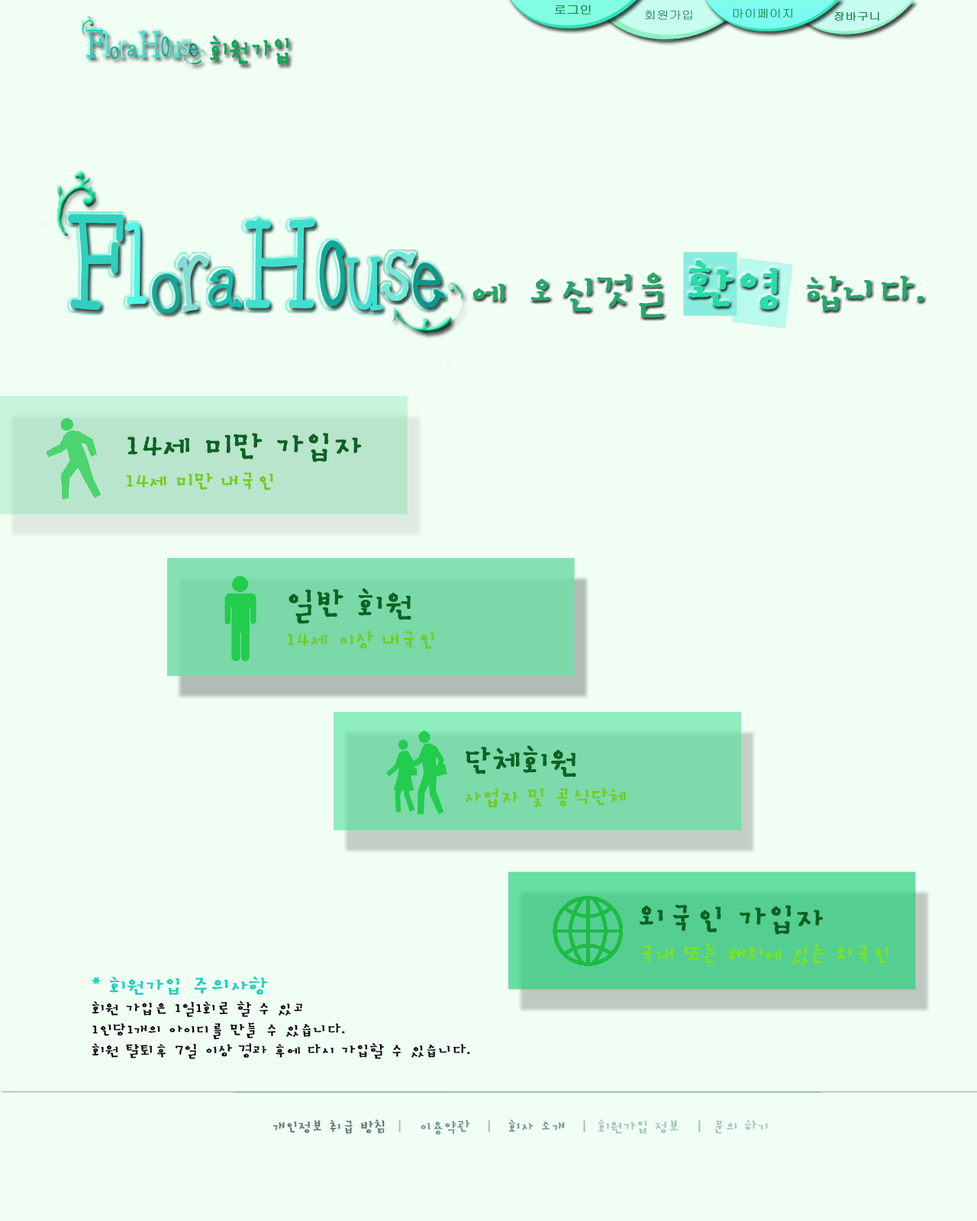
<style>
.page{position:relative;width:977px;height:1221px;background:#f1fef4}
.page>*{position:absolute;margin:0}
.t1{font:11.4px "Gulim";color:#198445;font-weight:bold;scale:1.1 1}
.t2{font:11.4px "Gulim";color:#097334;font-weight:bold;scale:1.1 1}
.t3{font:10.3px "Gulim";color:#198445;font-weight:bold;scale:1.13 1}
.t4{font:38.2px "Pinwheel";color:#2ed0bf;font-weight:bold;scale:0.8 1}
.t5{font:33.4px "Pinwheel";color:#4df7e6;font-weight:bold;scale:0.74 1}
.t6{font:20.4px "Pinwheel";color:#10a899;font-weight:bold;scale:0.97 1}
.t7{font:35.3px "Pinwheel";color:#40e0d0;font-weight:bold;scale:0.77 1}
.t8{font:34.4px "Pinwheel";color:#0ba999;font-weight:bold;scale:0.52 1}
.t9{font:25.5px "Pinwheel";color:#40e0d0;font-weight:bold;scale:0.77 1}
.t10{font:25.5px "Pinwheel";color:#06998a;font-weight:bold;scale:0.77 1}
.t11{font:28.9px "Pinwheel";color:#80ded4;font-weight:bold;scale:0.78 1}
.t12{font:26.5px "Pinwheel";color:#6feadb;font-weight:bold;scale:0.85 1}
.t13{font:36.1px "SanKrL";color:#10a85b;font-weight:bold;scale:0.8 1}
.t14{font:20.1px "Pinwheel";color:#0dc2af;font-weight:bold;scale:0.9 1}
.t15{font:126.9px "Pinwheel";color:#2ed0bf;font-weight:bold;scale:0.79 1}
.t16{font:111px "Pinwheel";color:#4df7e6;font-weight:bold;scale:0.73 1}
.t17{font:67.7px "Pinwheel";color:#10a899;font-weight:bold;scale:0.96 1}
.t18{font:117.4px "Pinwheel";color:#40e0d0;font-weight:bold;scale:0.77 1}
.t19{font:114.2px "Pinwheel";color:#0ba999;font-weight:bold;scale:0.51 1}
.t20{font:84.6px "Pinwheel";color:#40e0d0;font-weight:bold;scale:0.77 1}
.t21{font:84.6px "Pinwheel";color:#06998a;font-weight:bold;scale:0.77 1}
.t22{font:88.1px "Pinwheel";color:#6feadb;font-weight:bold;scale:0.85 1}
.t23{font:66.6px "Pinwheel";color:#0dc2af;font-weight:bold;scale:0.9 1}
.t24{font:45.8px "SanKrL";color:#1aa260;font-weight:bold;scale:1.1 1}
.t25{font:61px "SanKrL";color:#22daa4;font-weight:bold;scale:1.1 1}
.t26{font:39.7px "SanKrL";color:#0c6222;font-weight:bold}
.t27{font:25.2px "SanKrL";color:#72cc22;font-weight:bold}
.t28{font:25.2px "SanKrL";color:#7be51e;font-weight:bold}
.t29{font:17.6px "SanKrL";color:#080808;font-weight:bold;scale:1.1 1}
.t30{font:22.9px "SanKrL";color:#20cebd;font-weight:bold;scale:1.1 1}
.t31{font:25.2px "SanKrL";color:#20cebd;font-weight:bold;scale:1.1 1}
.t32{font:17.6px "SanKrL";color:#a1c4bf;font-weight:bold}
.t33{font:17.6px "SanKrL";color:#5d7974;font-weight:bold}
.t34{font:17.6px "SanKrL";color:#719891;font-weight:bold}
</style>
<div class="page">
<p class="t1" style="left:555px;top:5px;width:36px;height:9px">로그인</p>
<p class="t2" style="left:645px;top:10px;width:47px;height:10px">회원가입</p>
<p class="t2" style="left:733px;top:8px;width:59px;height:10px">마이페이지</p>
<p class="t3" style="left:834px;top:11px;width:45px;height:10px">장바구니</p>
<p class="t4" style="left:85px;top:29px;width:114px;height:30px">F<span class="t5">l</span><span class="t6">o   </span><span class="t7">H</span><span class="t8">o</span><span class="t9">u </span><span class="t10">e</span></p>
<p class="t11" style="left:118px;top:40px;width:10px;height:18px;rotate:-9deg">r</p>
<p class="t12" style="left:179px;top:40px;width:12px;height:15px;rotate:7deg">s</p>
<p class="t13" style="left:210px;top:35px;width:79px;height:30px">회원가입</p>
<p class="t14" style="left:127px;top:44px;width:11px;height:12px;rotate:6deg">a</p>
<p class="t15" style="left:67px;top:214px;width:378px;height:99px">F<span class="t16">l</span><span class="t17">o   </span><span class="t18">H</span><span class="t19">o</span><span class="t20">u </span><span class="t21">e</span></p>
<p class="t22" style="left:381px;top:251px;width:34px;height:50px;rotate:7deg">s</p>
<p class="t23" style="left:208px;top:269px;width:34px;height:39px;rotate:6deg">a</p>
<p class="t24" style="left:472px;top:260px;width:451px;height:57px;opacity:0.94">에 오신것을 <span class="t25">환영 </span>합니다.</p>
<p class="t26" style="left:127px;top:433px;width:235px;height:58px">14세 미만 가입자<br><span class="t27">14세 미만 내국인</span></p>
<p class="t27" style="left:288px;top:588px;width:146px;height:61px"><span class="t26">일반 회원<br></span>14세 이상 내국인</p>
<p class="t27" style="left:465px;top:745px;width:161px;height:63px"><span class="t26">단체회원<br></span>사업자 및 공식단체</p>
<p class="t28" style="left:639px;top:904px;width:249px;height:60px"><span class="t26">외국인 가입자<br></span>국내 또는 해외에 있는 외국인</p>
<p class="t29" style="left:92px;top:976px;width:378px;height:83px"><span class="t30">* 회원가입 </span><span class="t31">주의</span><span class="t30">사항  <br></span>회원 가입은 1일1회로 할 수 있고 <br>1인당1개의 아이디를 만들 수 있습니다.<br>회원 탈퇴후 7일 이상 경과 후에 다시 가입할 수 있습니다.</p>
<p class="t32" style="left:272px;top:1119px;width:496px;height:16px"><span class="t33">개인정보 취급 방침</span>  |   <span class="t34">이용약관</span>   |   <span class="t34">회사 소개 </span>  |  회원가입 정보   |  문의 하기</p>
</div>
